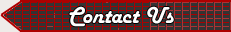
<style>
.page{position:relative;width:231px;height:32px;background:#333333}
.page>*{position:absolute;margin:0}
.t1{font:24px "HarlowSolid";color:#ffffff}
</style>
<div class="page">
<p class="t1" style="left:69px;top:6px;width:105px;height:21px">Contact Us</p>
</div>
